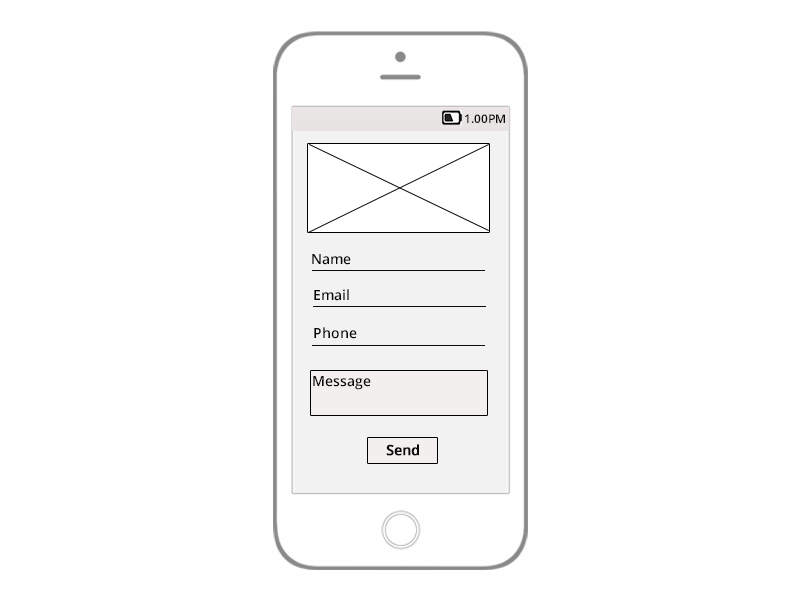
<style>
.page{position:relative;width:800px;height:600px;background:#ffffff}
.page>*{position:absolute;margin:0}
.t1{font:12px "OpenSans-Semibold";color:#090909}
.t2{font:14px "OpenSans-Semibold";color:#090909}
.t3{font:18px "OpenSans-Semibold";color:#090909}
.t4{font:14px "OpenSans-Semibold";color:#090909;font-weight:bold}
.t5{font:18px "OpenSans-Semibold";color:#090909;font-weight:bold}
</style>
<div class="page">
<p class="t1" style="left:465px;top:114px;width:40px;height:9px">1.00PM</p>
<p class="t2" style="left:312px;top:254px;width:39px;height:11px">Name</p>
<p class="t2" style="left:314px;top:289px;width:35px;height:12px">Email</p>
<p class="t2" style="left:314px;top:327px;width:43px;height:12px">Phone</p>
<p class="t2" style="left:313px;top:376px;width:58px;height:14px"><span class="t3">  <br></span> Message</p>
<p class="t4" style="left:386px;top:444px;width:33px;height:12px"><span class="t5"> </span> Send</p>
</div>
